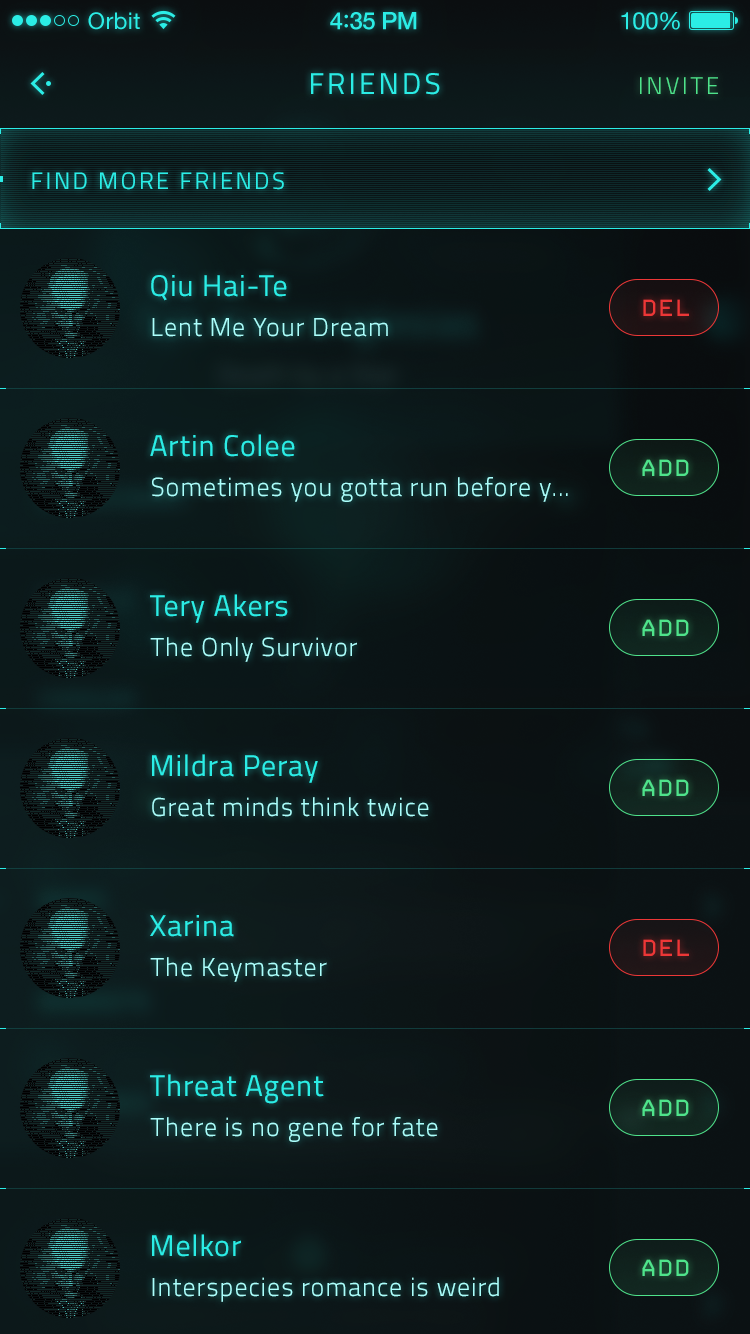
<style>
.page{position:relative;width:750px;height:1334px}
.page>*{position:absolute;margin:0}
.t1{font:23px "HelveticaNeue";letter-spacing:0.02em;color:#2bede6}
.t2{font:24px "HelveticaNeue-Medium";letter-spacing:-0.02em;color:#2bede6}
.t3{font:26px "Avenir-Medium";letter-spacing:-0.02em;color:#2bede6}
.t4{font:24px "HelveticaNeue";letter-spacing:-0.02em;color:#2bede6}
.t5{font:30px "Titillium-Regular";letter-spacing:0.1em;color:#2bede6;text-transform:uppercase}
.t6{font:24px "Titillium-Light";letter-spacing:0.12em;color:#4fe38b;text-transform:uppercase}
.t7{font:24px "Titillium-Regular";letter-spacing:0.1em;color:#2bede6;text-transform:uppercase}
.t8{font:30px "Titillium-Regular";letter-spacing:0.03em;color:#2bede6}
.t9{font:28px "ProFontWindows";letter-spacing:0.1em;color:#ed3737;text-transform:uppercase}
.t10{font:26px "Titillium-Light";letter-spacing:0.04em;color:#aafffc}
.t11{font:28px "ProFontWindows";letter-spacing:0.1em;color:#4fe38b;text-transform:uppercase}
</style>
<div class="page">
<p class="t1" style="left:88px;top:12px;width:52px;height:18px">Orbit</p>
<p class="t2" style="left:330px;top:12px;width:87px;height:18px">4<span class="t3">:</span>35 PM</p>
<p class="t4" style="left:621px;top:12px;width:59px;height:18px">100%</p>
<p class="t5" style="left:311px;top:73px;width:129px;height:22px">Friends</p>
<p class="t6" style="left:640px;top:77px;width:78px;height:17px">Invite</p>
<p class="t7" style="left:32px;top:172px;width:252px;height:18px">Find more friends</p>
<p class="t8" style="left:151px;top:275px;width:136px;height:26px">Qiu Hai-Te</p>
<p class="t9" style="left:643px;top:299px;width:46px;height:17px">DEL</p>
<p class="t10" style="left:152px;top:318px;width:236px;height:19px">Lent Me Your Dream</p>
<p class="t8" style="left:150px;top:434px;width:145px;height:23px">Artin Colee</p>
<p class="t11" style="left:642px;top:459px;width:47px;height:17px">ADD</p>
<p class="t10" style="left:152px;top:477px;width:416px;height:25px">Sometimes you gotta run before y...</p>
<p class="t8" style="left:150px;top:594px;width:138px;height:29px">Tery Akers</p>
<p class="t11" style="left:642px;top:619px;width:47px;height:17px">ADD</p>
<p class="t10" style="left:150px;top:637px;width:207px;height:25px">The Only Survivor</p>
<p class="t8" style="left:152px;top:754px;width:166px;height:29px">Mildra Peray</p>
<p class="t11" style="left:642px;top:779px;width:47px;height:17px">ADD</p>
<p class="t10" style="left:152px;top:797px;width:277px;height:20px">Great minds think twice</p>
<p class="t8" style="left:150px;top:915px;width:84px;height:22px">Xarina</p>
<p class="t9" style="left:643px;top:939px;width:46px;height:17px">DEL</p>
<p class="t10" style="left:150px;top:957px;width:177px;height:25px">The Keymaster</p>
<p class="t8" style="left:150px;top:1074px;width:174px;height:30px">Threat Agent</p>
<p class="t11" style="left:642px;top:1099px;width:47px;height:17px">ADD</p>
<p class="t10" style="left:150px;top:1117px;width:288px;height:25px">There is no gene for fate</p>
<p class="t8" style="left:152px;top:1234px;width:89px;height:23px">Melkor</p>
<p class="t11" style="left:642px;top:1259px;width:47px;height:17px">ADD</p>
<p class="t10" style="left:152px;top:1277px;width:347px;height:25px">Interspecies romance is weird</p>
</div>
